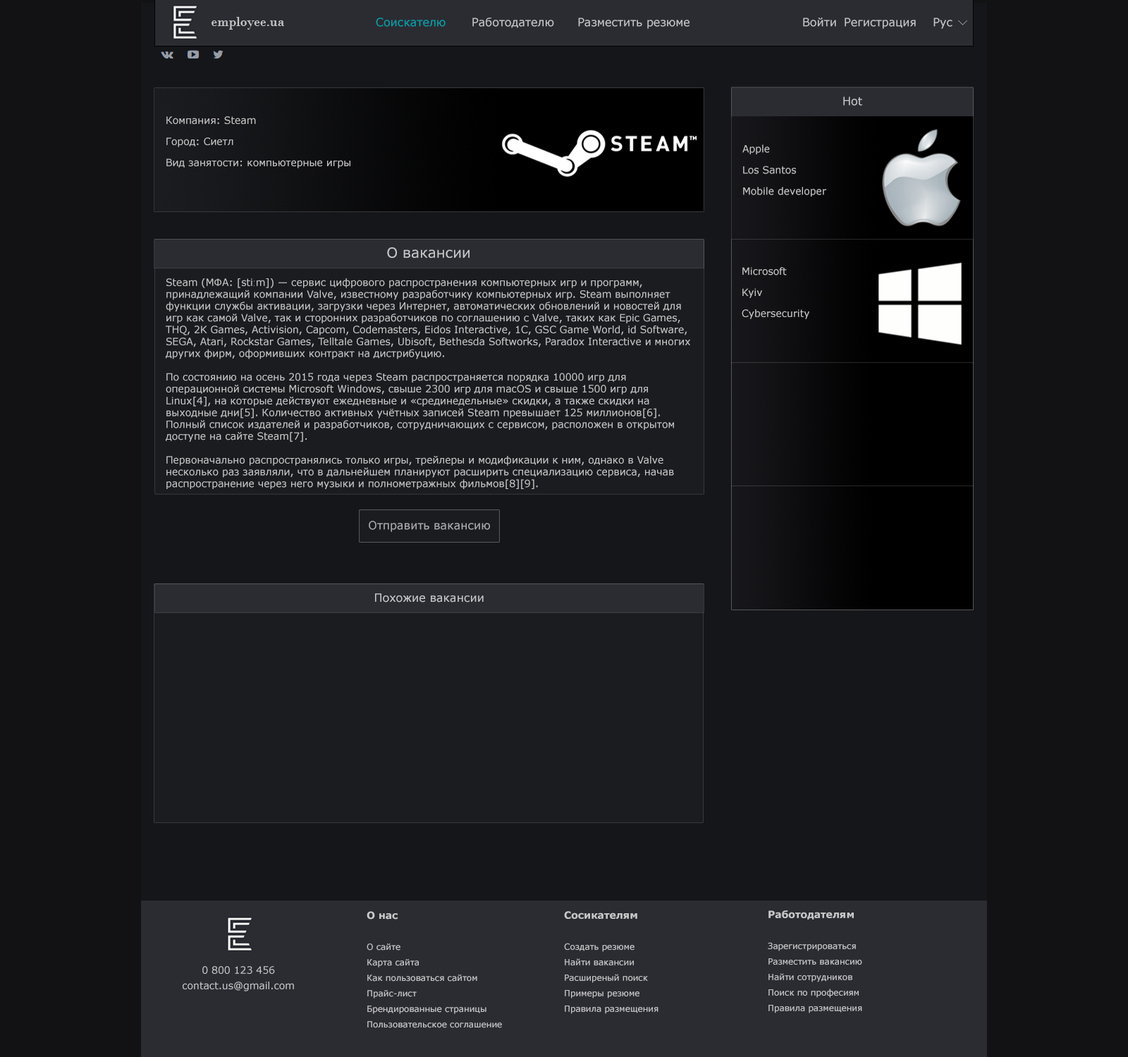
<style>
.page{position:relative;width:1128px;height:1057px;background:#121215}
.page>*{position:absolute;margin:0}
.t1{font:14.1px "BodoniMT";color:#c8c8c9}
.t2{font:11.3px "Verdana";color:#00a4af}
.t3{font:11.3px "Verdana";color:#c8c8c9}
.t4{font:9.9px/21.1px "Verdana";color:#c8c8c9}
.t5{font:14.1px "Verdana";color:#c8c8c9}
.t6{font:9.8px/21.1px "Verdana";color:#c8c8c9}
.t7{font:9.9px "Verdana";color:#c8c8c9}
.t8{font:9.9px "ArialMT";color:#c8c8c9}
.t9{font:11.3px "Verdana";color:#adadaf}
.t10{font:8.5px/15.5px "Verdana";color:#c8c8c9}
.t11{font:9.9px/15.5px "Verdana-Bold";color:#c8c8c9}
.t12{font:9.9px/15.5px "Verdana";color:#c8c8c9}
</style>
<div class="page">
<p class="t1" style="left:211px;top:17px;width:73px;height:13px">employee.ua</p>
<p class="t2" style="left:376px;top:18px;width:69px;height:9px">Соискателю</p>
<p class="t3" style="left:472px;top:18px;width:82px;height:10px">Работодателю</p>
<p class="t3" style="left:578px;top:18px;width:111px;height:11px">Разместить резюме</p>
<p class="t3" style="left:803px;top:18px;width:33px;height:9px">Войти</p>
<p class="t3" style="left:844px;top:18px;width:72px;height:11px">Регистрация</p>
<p class="t3" style="left:933px;top:18px;width:19px;height:11px">Рус</p>
<p class="t3" style="left:843px;top:97px;width:19px;height:9px">Hot</p>
<p class="t4" style="left:166px;top:116px;width:184px;height:52px;text-align:right">Компания: Steam<br>Город: Сиетл<br>Вид занятости: компьютерные игры</p>
<p class="t4" style="left:742px;top:144px;width:84px;height:53px;text-align:right">Apple<br>Los Santos<br>Mobile developer</p>
<p class="t5" style="left:387px;top:247px;width:82px;height:11px">О вакансии</p>
<p class="t6" style="left:742px;top:267px;width:67px;height:52px;text-align:right">Microsoft<br>Kyiv<br>Cybersecurity</p>
<p class="t7" style="left:166px;top:278px;width:524px;height:211px;text-align:right">Steam (МФА: [sti<span class="t8">ː</span>m]) — сервис цифрового распространения компьютерных игр и программ, принадлежащий компании Valve, известному разработчику компьютерных игр. Steam выполняет функции службы активации, загрузки через Интернет, автоматических обновлений и новостей для игр как самой Valve, так и сторонних разработчиков по соглашению с Valve, таких как Epic Games, THQ, 2K Games, Activision, Capcom, Codemasters, Eidos Interactive, 1С, GSC Game World, id Software, SEGA, Atari, Rockstar Games, Telltale Games, Ubisoft, Bethesda Softworks, Paradox Interactive и многих других фирм, оформивших контракт на дистрибуцию.<br><br>По состоянию на осень 2015 года через Steam распространяется порядка 10000 игр для операционной системы Microsoft Windows, свыше 2300 игр для macOS и свыше 1500 игр для Linux[4], на которые действуют ежедневные и «срединедельные» скидки, а также скидки на выходные дни[5]. Количество активных учётных записей Steam превышает 125 миллионов[6]. Полный список издателей и разработчиков, сотрудничающих с сервисом, расположен в открытом доступе на сайте Steam[7].<br><br>Первоначально распространялись только игры, трейлеры и модификации к ним, однако в Valve несколько раз заявляли, что в дальнейшем планируют расширить специализацию сервиса, начав распространение через него музыки и полнометражных фильмов[8][9].</p>
<p class="t9" style="left:369px;top:521px;width:121px;height:11px">Отправить вакансию</p>
<p class="t3" style="left:375px;top:594px;width:109px;height:9px">Похожие вакансии</p>
<p class="t10" style="left:367px;top:911px;width:135px;height:117px;text-align:right"><span class="t11">О нас<br><br></span>О сайте<br>Карта сайта<br>Как пользоваться сайтом<br>Прайс-лист<br>Брендированные страницы<br>Пользовательское соглашение</p>
<p class="t10" style="left:564px;top:911px;width:94px;height:103px;text-align:right"><span class="t11">Сосикателям<br><br></span>Создать резюме<br>Найти вакансии<br>Расширеный поиск<br>Примеры резюме<br>Правила размещения</p>
<p class="t10" style="left:768px;top:911px;width:94px;height:103px;text-align:right"><span class="t11">Работодателям<br><br></span>Зарегистрироваться<br>Разместить вакансию<br>Найти сотрудников<br>Поиск по професиям<br>Правила размещения</p>
<p class="t12" style="left:183px;top:966px;width:111px;height:26px;text-align:center">0 800 123 456<br>contact.us@gmail.com</p>
</div>
